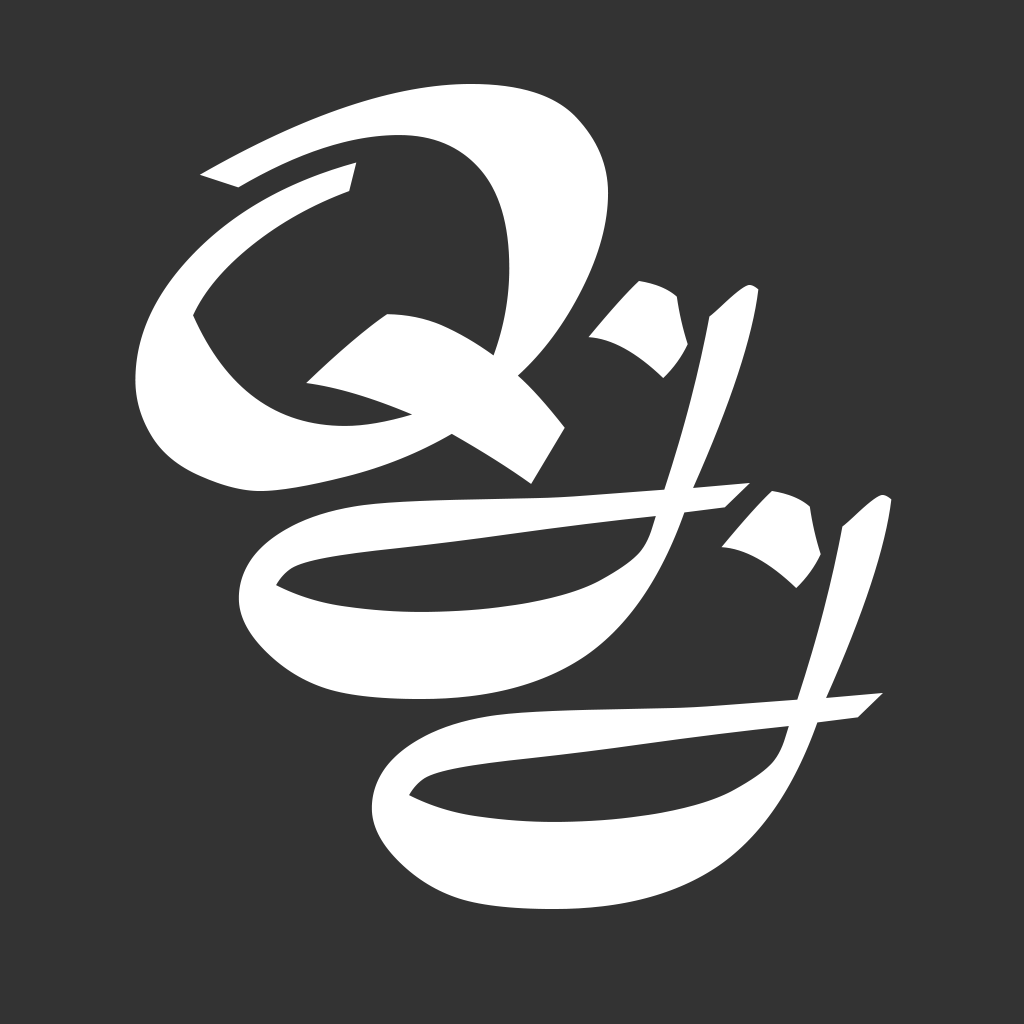
<style>
.page{position:relative;width:1024px;height:1024px;background:#333333}
.page>*{position:absolute;margin:0}
.t1{font:455px "MaturaMTScriptCapitals";color:#ffffff}
</style>
<div class="page">
<p class="t1" style="left:135px;top:84px;width:474px;height:407px">Q</p>
<p class="t1" style="left:238px;top:281px;width:521px;height:418px">J</p>
<p class="t1" style="left:371px;top:491px;width:521px;height:418px">J</p>
</div>
